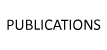
<style>
.page{position:relative;width:107px;height:50px;background:#ffffff}
.page>*{position:absolute;margin:0}
.t1{font:16px "Calibri";color:#020202}
</style>
<div class="page">
<p class="t1" style="left:7px;top:19px;width:94px;height:11px">PUBLICATIONS</p>
</div>
